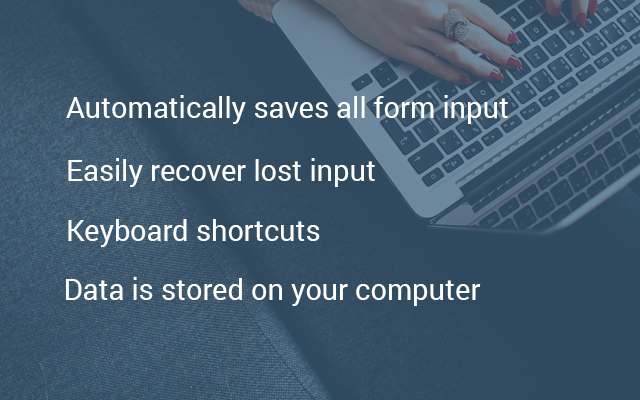
<style>
.page{position:relative;width:640px;height:400px}
.page>*{position:absolute;margin:0}
.t1{font:28.9px "Roboto-Regular";color:#ffffff}
</style>
<div class="page">
<p class="t1" style="left:66px;top:95px;width:442px;height:29px">Automatically saves all form input</p>
<p class="t1" style="left:68px;top:158px;width:307px;height:29px">Easily recover lost input</p>
<p class="t1" style="left:68px;top:219px;width:252px;height:28px">Keyboard shortcuts</p>
<p class="t1" style="left:66px;top:277px;width:415px;height:29px">Data is stored on your computer</p>
</div>
